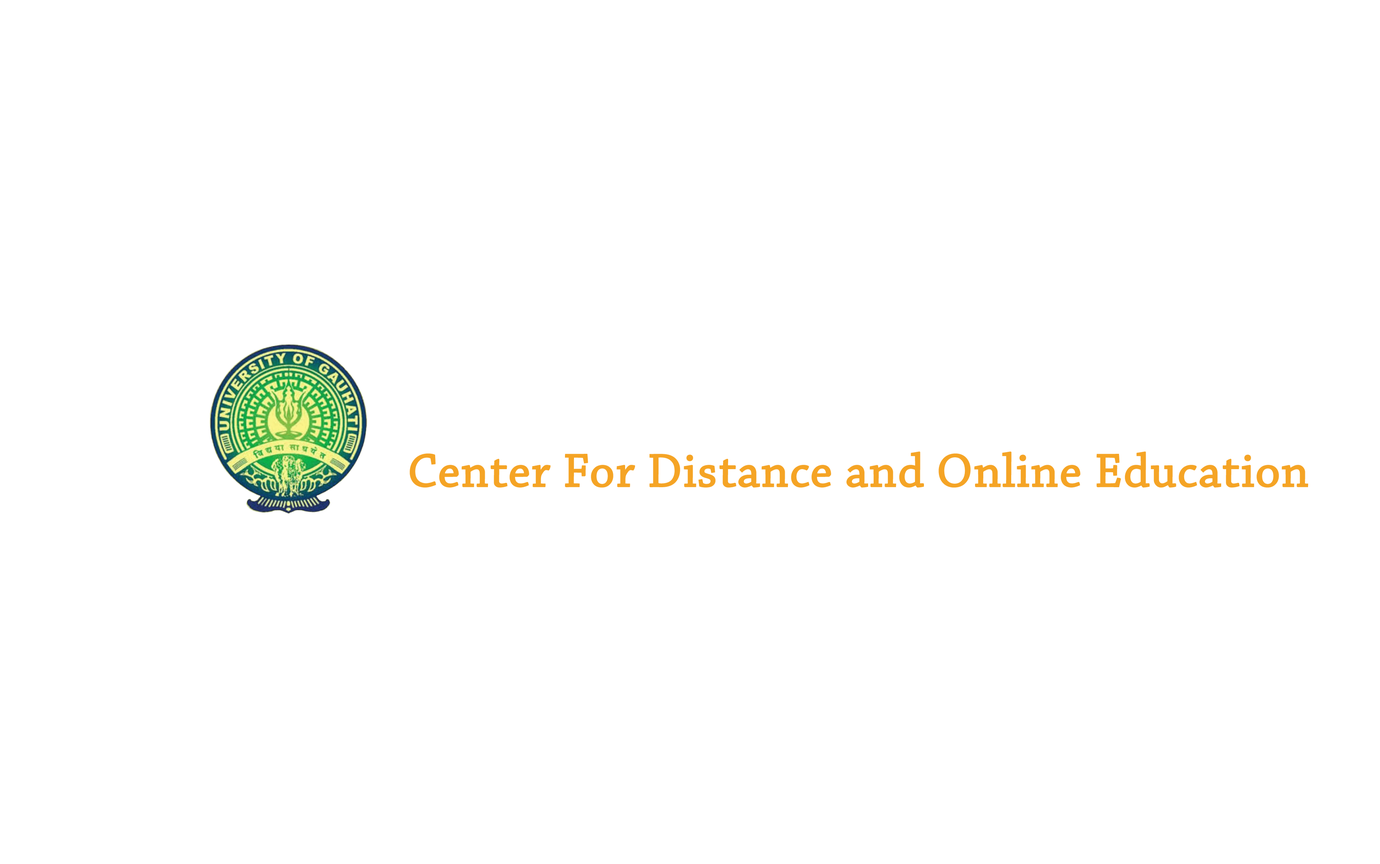
<style>
.page{position:relative;width:1380px;height:864px;background:#ffffff}
.page>*{position:absolute;margin:0}
.t1{font:49.1px "ChaparralPro-Regular";color:#f5a425;font-weight:bold}
</style>
<div class="page">
<p class="t1" style="left:410px;top:452px;width:898px;height:36px">Center For Distance and Online Education</p>
</div>
